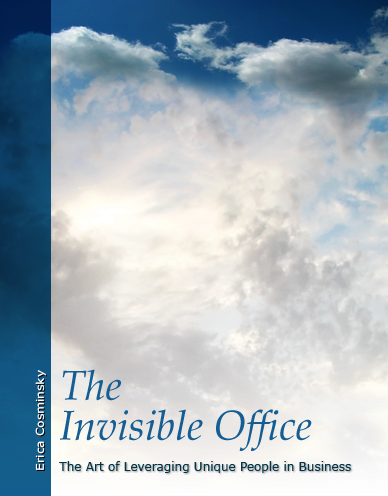
<style>
.page{position:relative;width:388px;height:496px}
.page>*{position:absolute;margin:0}
.t1{font:10.5px "Verdana";color:#ffffff;scale:1.16 1}
.t2{font:41.5px/40px "PalatinoLinotype-Italic";color:#155e94}
.t3{font:12px "Verdana";color:#033549}
</style>
<div class="page">
<p class="t1" style="left:35px;top:370px;width:11px;height:100px;rotate:-90deg">Erica Cosminsky</p>
<p class="t2" style="left:60px;top:369px;width:252px;height:82px">The<br>Invisible Office</p>
<p class="t3" style="left:59px;top:461px;width:292px;height:12px">The Art of Leveraging Unique People in Business</p>
</div>
